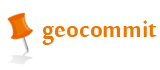
<style>
.page{position:relative;width:160px;height:70px;background:#ffffff}
.page>*{position:absolute;margin:0}
.t1{font:36px "MoolBoran";color:#ef7600}
</style>
<div class="page">
<p class="t1" style="left:42px;top:20px;width:115px;height:25px">geocommit</p>
</div>
